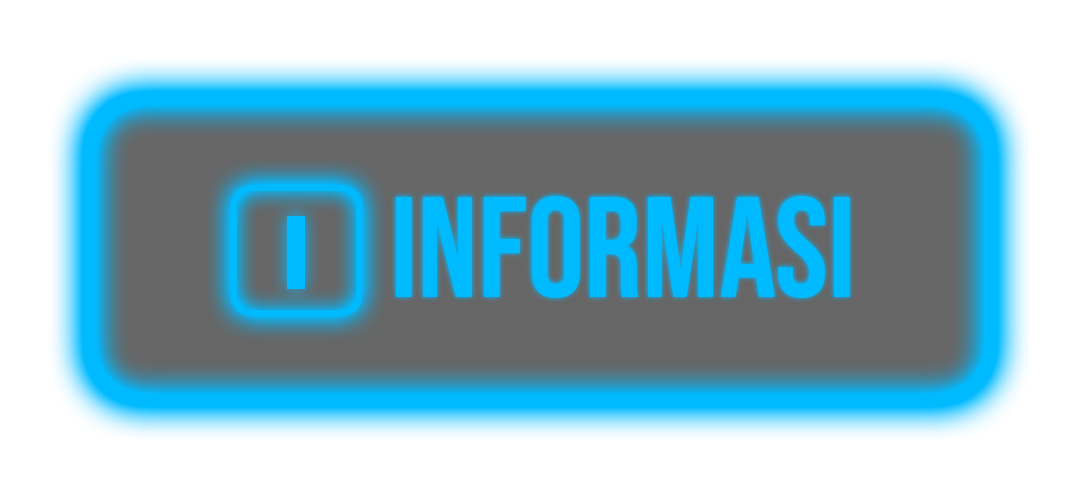
<style>
.page{position:relative;width:1080px;height:500px;background:#ffffff}
.page>*{position:absolute;margin:0}
.t1{font:142.7px "BebasNeue-Regular";color:#00baff}
</style>
<div class="page">
<p class="t1" style="left:396px;top:196px;width:454px;height:102px">INFORMASI</p>
</div>
